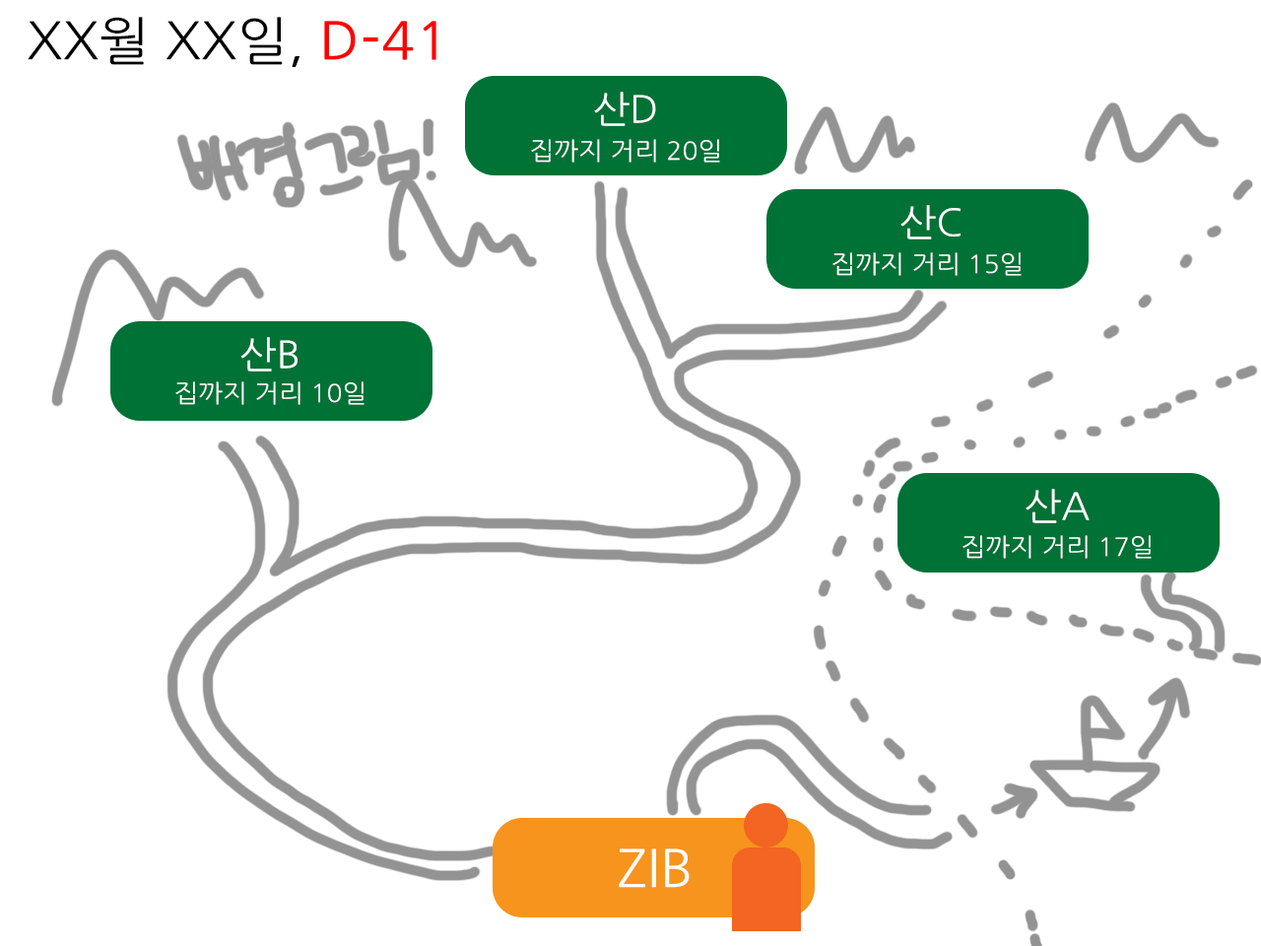
<style>
.page{position:relative;width:1261px;height:946px;background:#ffffff}
.page>*{position:absolute;margin:0}
.t1{font:51.5px "NanumGothic";color:#000000;scale:1.05 1}
.t2{font:51.5px "NanumGothic";color:#ff0000;font-weight:bold;scale:1.05 1}
.t3{font:37.4px "NanumGothic";color:#ffffff;scale:1.05 1}
.t4{font:24.7px "NanumGothic";color:#ffffff;scale:1.05 1}
.t5{font:51.5px "NanumGothic";color:#ffffff;scale:1.05 1}
</style>
<div class="page">
<p class="t1" style="left:28px;top:17px;width:408px;height:50px">XX월 XX일, <span class="t2">D-41</span></p>
<p class="t3" style="left:594px;top:92px;width:62px;height:34px">산D</p>
<p class="t4" style="left:531px;top:139px;width:189px;height:24px">집까지 거리 20일</p>
<p class="t3" style="left:900px;top:205px;width:60px;height:34px">산C</p>
<p class="t4" style="left:832px;top:252px;width:190px;height:24px">집까지 거리 15일</p>
<p class="t3" style="left:240px;top:337px;width:57px;height:34px">산B</p>
<p class="t4" style="left:175px;top:381px;width:189px;height:24px">집까지 거리 10일</p>
<p class="t3" style="left:1025px;top:489px;width:65px;height:34px">산A</p>
<p class="t4" style="left:962px;top:535px;width:190px;height:24px">집까지 거리 17일</p>
<p class="t5" style="left:619px;top:848px;width:71px;height:40px">ZIB</p>
</div>
